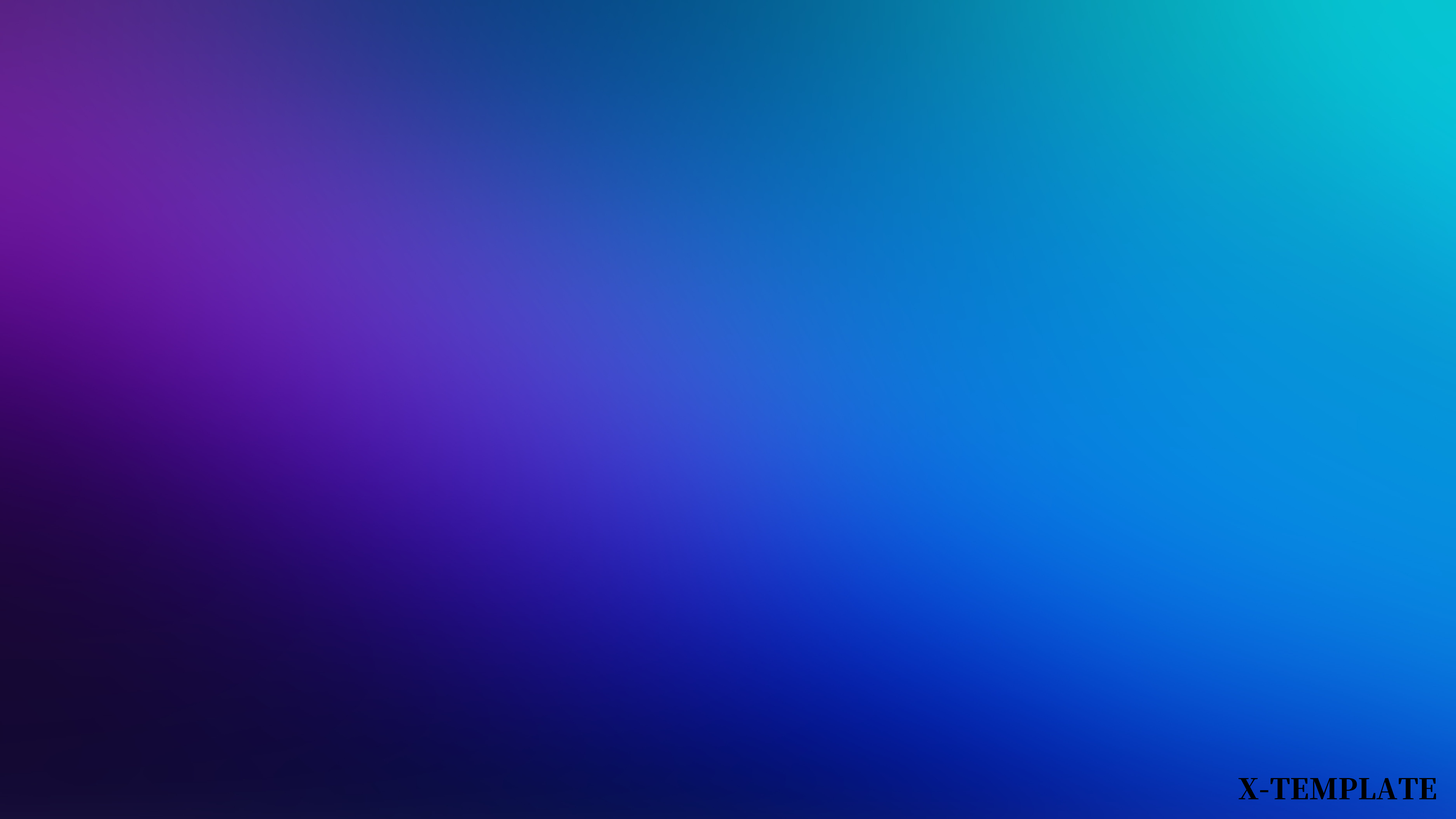
<style>
.page{position:relative;width:1456px;height:819px}
.page>*{position:absolute;margin:0}
.t1{font:28.4px "SourceHanSerifCN-Heavy";color:#000000;text-transform:uppercase}
</style>
<div class="page">
<p class="t1" style="left:1238px;top:778px;width:198px;height:21px">X-Template</p>
</div>
